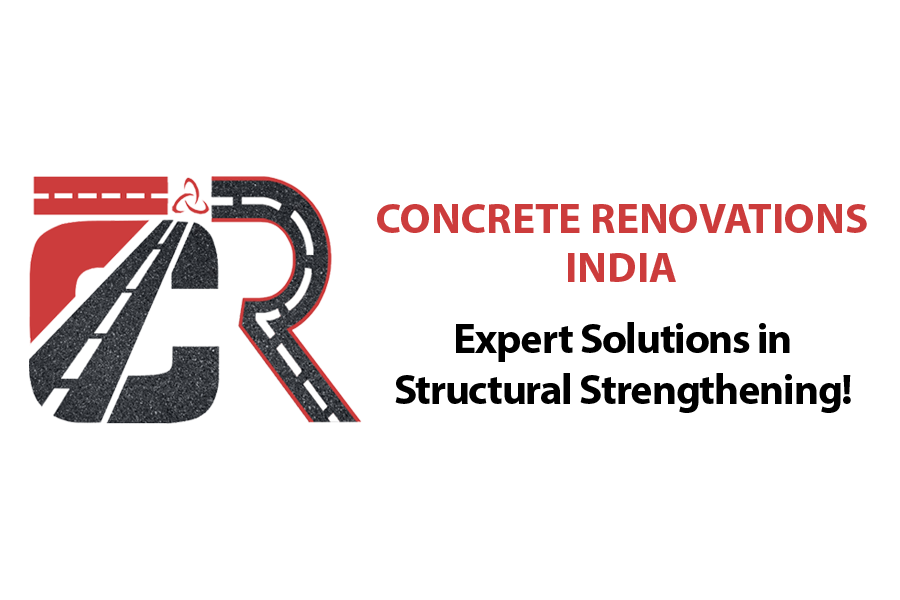
<style>
.page{position:relative;width:900px;height:600px;background:#ffffff}
.page>*{position:absolute;margin:0}
.t1{font:43px "MyriadPro-Bold";color:#cc3c3c}
.t2{font:43px "MyriadPro-Bold";letter-spacing:-0.03em;color:#000000}
</style>
<div class="page">
<p class="t1" style="left:377px;top:204px;width:490px;height:29px">CONCRETE RENOVATIONS</p>
<p class="t1" style="left:568px;top:253px;width:108px;height:29px">INDIA</p>
<p class="t2" style="left:456px;top:322px;width:334px;height:40px">Expert Solutions in</p>
<p class="t2" style="left:395px;top:373px;width:456px;height:40px">Structural Strengthening!</p>
</div>
